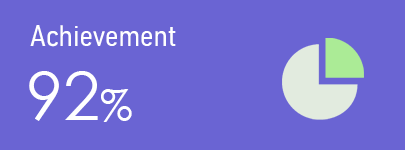
<style>
.page{position:relative;width:405px;height:150px;background:#6a64d3}
.page>*{position:absolute;margin:0}
.t1{font:29.2px "Bahnschrift-SemiLightSemiCondensed";color:#ffffff}
.t2{font:66.7px "CenturyGothic";color:#ffffff}
.t3{font:41.7px "CenturyGothic";color:#ffffff}
</style>
<div class="page">
<p class="t1" style="left:30px;top:25px;width:146px;height:22px">Achievement</p>
<p class="t2" style="left:29px;top:71px;width:103px;height:51px">92<span class="t3">%</span></p>
</div>
